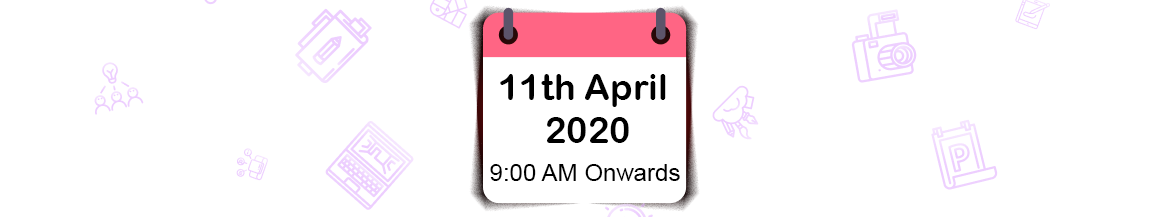
<style>
.page{position:relative;width:1170px;height:217px;background:#ffffff}
.page>*{position:absolute;margin:0}
.t1{font:36px "ArialRoundedMTBold";color:#000000}
.t2{font:24px "ArialMT";color:#000000}
</style>
<div class="page">
<p class="t1" style="left:500px;top:74px;width:166px;height:69px;text-align:center">11th April <br>2020</p>
<p class="t2" style="left:490px;top:164px;width:190px;height:17px">9:00 AM Onwards</p>
</div>
